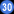
<style>
.page{position:relative;width:14px;height:14px;background:#4679df}
.page>*{position:absolute;margin:0}
.t1{font:11px "ArialNarrow-Bold";letter-spacing:-0.01em;color:#ffffff}
</style>
<div class="page">
<p class="t1" style="left:2px;top:1px;width:10px;height:15px">30</p>
</div>
